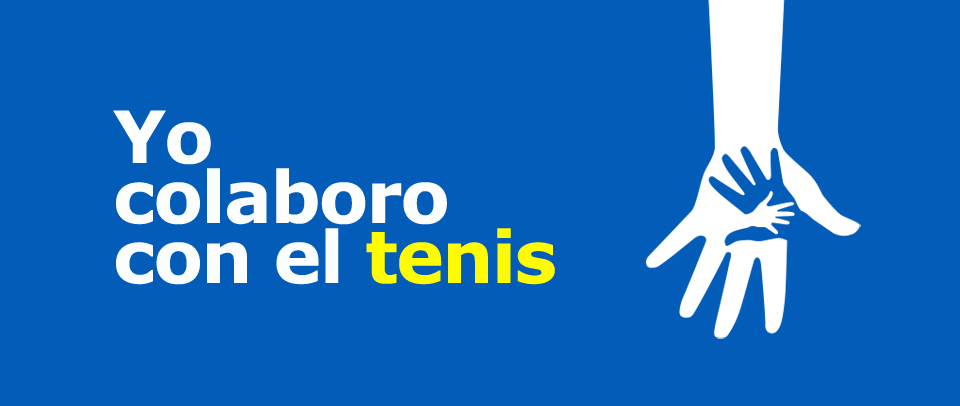
<style>
.page{position:relative;width:960px;height:406px;background:#025cb8}
.page>*{position:absolute;margin:0}
.t1{font:72px/60px "Verdana-Bold";letter-spacing:-0.025em;color:#fcfdfd}
.t2{font:72px/60px "Verdana-Bold";letter-spacing:-0.025em;color:#fefb04}
</style>
<div class="page">
<p class="t1" style="left:113px;top:110px;width:442px;height:175px">Yo<br>colaboro<br>con el <span class="t2">tenis</span></p>
</div>
